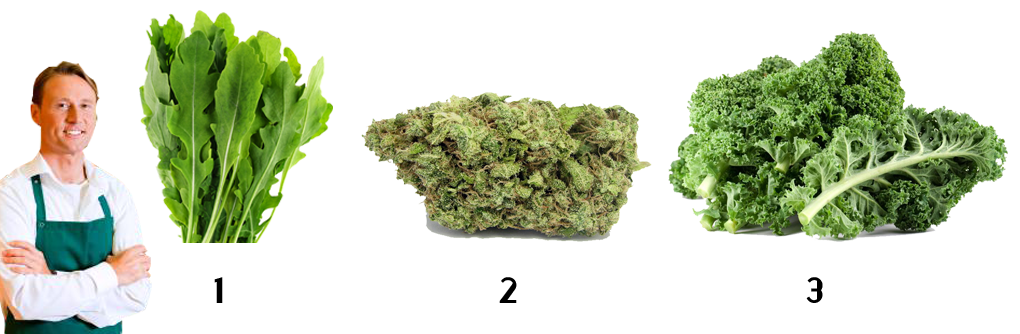
<style>
.page{position:relative;width:1020px;height:334px;background:#ffffff}
.page>*{position:absolute;margin:0}
.t1{font:55px "Beirut";color:#000000}
</style>
<div class="page">
<p class="t1" style="left:214px;top:277px;width:9px;height:26px">1</p>
<p class="t1" style="left:499px;top:277px;width:18px;height:26px">2</p>
<p class="t1" style="left:806px;top:277px;width:17px;height:26px">3</p>
</div>
